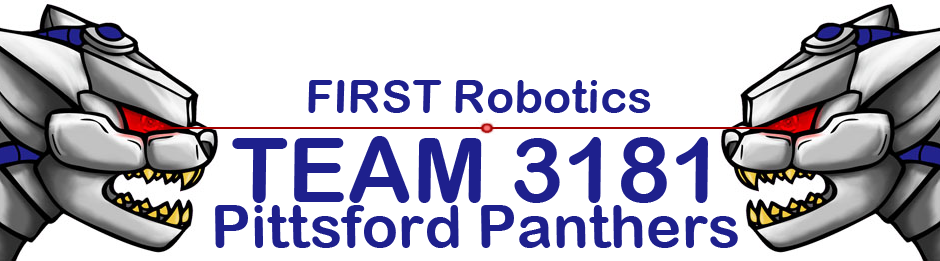
<style>
.page{position:relative;width:940px;height:261px;background:#ffffff}
.page>*{position:absolute;margin:0}
.t1{font:46.5px "ArialRoundedMTBold";color:#1e208d}
.t2{font:90px "ArialRoundedMTBold";color:#1e208d}
.t3{font:60px "ArialRoundedMTBold";color:#1e208d}
</style>
<div class="page">
<p class="t1" style="left:308px;top:80px;width:343px;height:33px">FIRST Robotics</p>
<p class="t2" style="left:232px;top:136px;width:476px;height:67px">TEAM 3181</p>
<p class="t3" style="left:215px;top:205px;width:523px;height:43px">Pittsford Panthers</p>
</div>
